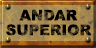
<style>
.page{position:relative;width:96px;height:48px}
.page>*{position:absolute;margin:0}
.t1{font:14.7px/14.7px "Arial-Black";letter-spacing:0.005em;text-transform:uppercase}
</style>
<div class="page">
<p class="t1" style="left:6px;top:9px;width:86px;height:27px;text-align:center">ANDAR<br>superior</p>
</div>
